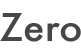
<style>
.page{position:relative;width:81px;height:54px;background:#ffffff}
.page>*{position:absolute;margin:0}
.t1{font:37px "Futura-Medium";color:#474747;scale:1.05 1}
</style>
<div class="page">
<p class="t1" style="left:0px;top:13px;width:81px;height:29px">Zero</p>
</div>
